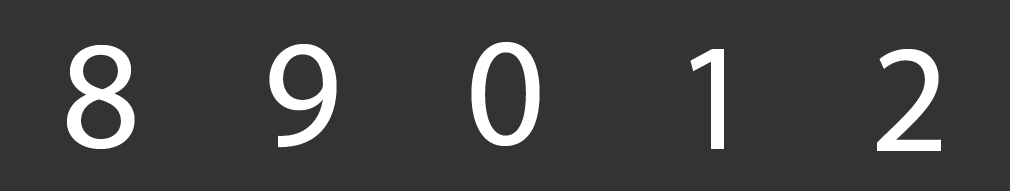
<style>
.page{position:relative;width:1010px;height:191px;background:#333333}
.page>*{position:absolute;margin:0}
.t1{font:154.2px "MyriadPro-Regular";color:#ffffff}
</style>
<div class="page">
<p class="t1" style="left:67px;top:45px;width:68px;height:104px">8</p>
<p class="t1" style="left:269px;top:44px;width:68px;height:104px">9</p>
<p class="t1" style="left:471px;top:42px;width:69px;height:104px">0</p>
<p class="t1" style="left:690px;top:49px;width:34px;height:100px">1</p>
<p class="t1" style="left:877px;top:49px;width:64px;height:102px">2</p>
</div>
